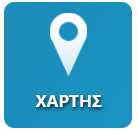
<style>
.page{position:relative;width:137px;height:132px}
.page>*{position:absolute;margin:0}
.t1{font:17px "SegoeUI-Bold";color:#ffffff}
</style>
<div class="page">
<p class="t1" style="left:35px;top:95px;width:67px;height:12px">ΧΑΡΤΗΣ</p>
</div>
